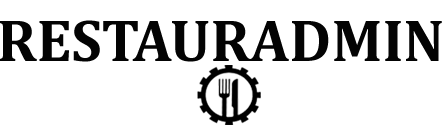
<style>
.page{position:relative;width:444px;height:138px;background:#ffffff}
.page>*{position:absolute;margin:0}
.t1{font:60px "Cambria-Bold";color:#030303}
</style>
<div class="page">
<p class="t1" style="left:0px;top:20px;width:442px;height:42px">RESTAURADMIN</p>
</div>
